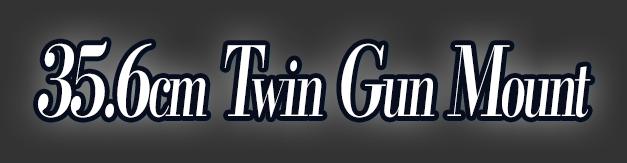
<style>
.page{position:relative;width:627px;height:163px;background:#333333}
.page>*{position:absolute;margin:0}
.t1{font:96px "KochoStd-Heavy";letter-spacing:-0.08em;color:#ffffff;font-style:italic;scale:0.62 1}
.t2{font:76.8px "KochoStd-Heavy";letter-spacing:-0.08em;color:#ffffff;font-style:italic;scale:0.62 1}
</style>
<div class="page">
<p class="t1" style="left:38px;top:41px;width:553px;height:77px">35.6<span class="t2">cm</span> T<span class="t2">win</span> G<span class="t2">un</span> M<span class="t2">ount</span></p>
</div>
